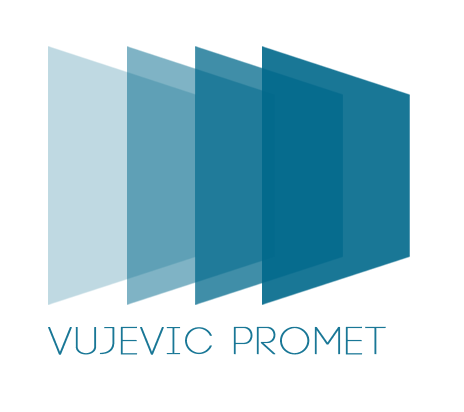
<style>
.page{position:relative;width:464px;height:412px;background:#ffffff}
.page>*{position:absolute;margin:0}
.t1{font:38.9px "Code-Light";letter-spacing:0.06em;color:#197796;font-weight:bold}
</style>
<div class="page">
<p class="t1" style="left:48px;top:326px;width:338px;height:29px">Vujevic Promet</p>
</div>
